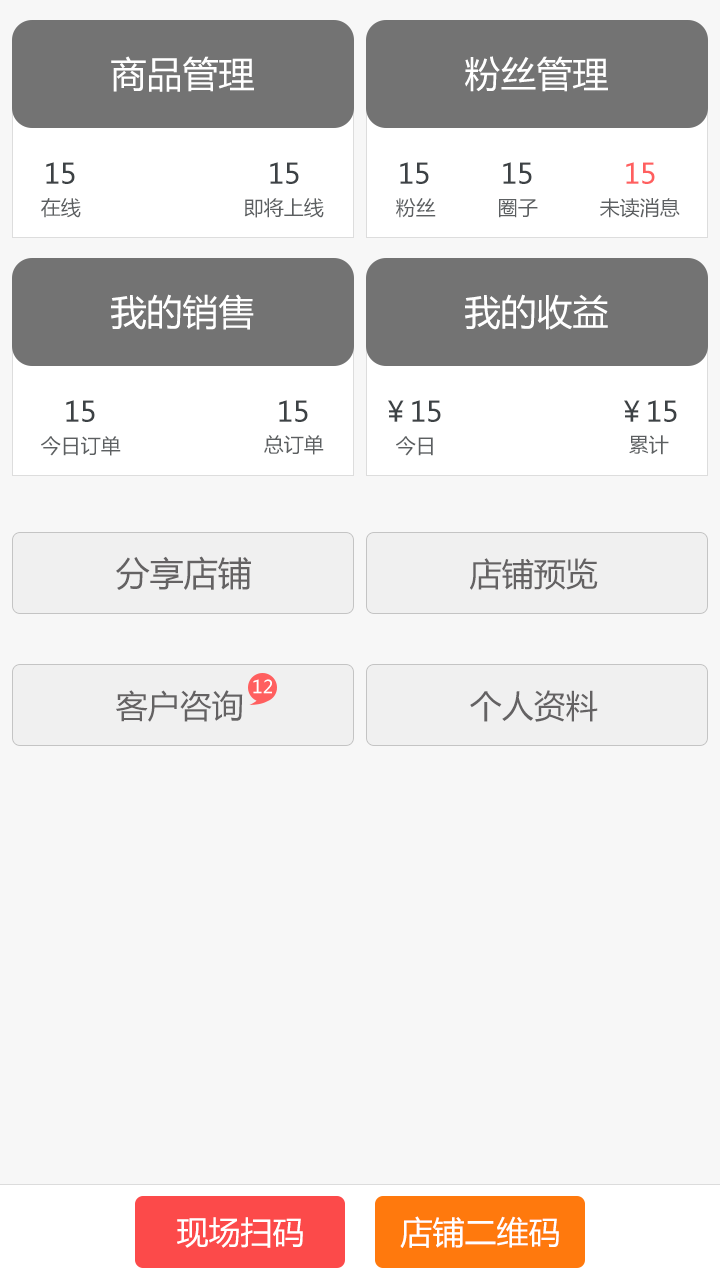
<style>
.page{position:relative;width:720px;height:1280px;background:#f7f7f7}
.page>*{position:absolute;margin:0}
.t1{font:36px "MicrosoftYaHei";color:#ffffff}
.t2{font:28px "MicrosoftYaHei";color:#3d4245}
.t3{font:28px "MicrosoftYaHei";color:#ff5f5f}
.t4{font:20px "MicrosoftYaHei";color:#5c5f61}
.t5{font:34px "MicrosoftYaHei";color:#646263}
.t6{font:32px "MicrosoftYaHei";color:#646263}
.t7{font:18px "MicrosoftYaHei";color:#ffffff}
.t8{font:32px "MicrosoftYaHei";color:#ffffff}
</style>
<div class="page">
<p class="t1" style="left:111px;top:56px;width:143px;height:36px">商品管理</p>
<p class="t1" style="left:465px;top:56px;width:143px;height:36px">粉丝管理</p>
<p class="t2" style="left:46px;top:162px;width:29px;height:22px">15</p>
<p class="t2" style="left:270px;top:162px;width:29px;height:22px">15</p>
<p class="t2" style="left:400px;top:162px;width:29px;height:22px">15</p>
<p class="t2" style="left:503px;top:162px;width:29px;height:22px">15</p>
<p class="t3" style="left:626px;top:162px;width:29px;height:22px">15</p>
<p class="t4" style="left:41px;top:198px;width:40px;height:20px">在线</p>
<p class="t4" style="left:244px;top:198px;width:80px;height:20px">即将上线</p>
<p class="t4" style="left:396px;top:198px;width:40px;height:20px">粉丝</p>
<p class="t4" style="left:600px;top:198px;width:80px;height:20px">未读消息</p>
<p class="t4" style="left:499px;top:199px;width:39px;height:19px">圈子</p>
<p class="t1" style="left:111px;top:294px;width:143px;height:36px">我的销售</p>
<p class="t1" style="left:465px;top:294px;width:143px;height:36px">我的收益</p>
<p class="t2" style="left:66px;top:400px;width:29px;height:22px">15</p>
<p class="t2" style="left:66px;top:400px;width:29px;height:22px">15</p>
<p class="t2" style="left:279px;top:400px;width:29px;height:22px">15</p>
<p class="t2" style="left:388px;top:400px;width:53px;height:22px">￥15</p>
<p class="t2" style="left:624px;top:400px;width:53px;height:22px">￥15</p>
<p class="t4" style="left:41px;top:436px;width:80px;height:20px">今日订单</p>
<p class="t4" style="left:264px;top:435px;width:60px;height:20px">总订单</p>
<p class="t4" style="left:396px;top:436px;width:37px;height:20px">今日</p>
<p class="t4" style="left:629px;top:435px;width:40px;height:20px">累计</p>
<p class="t5" style="left:116px;top:556px;width:135px;height:34px">分享店铺</p>
<p class="t6" style="left:470px;top:558px;width:128px;height:32px">店铺预览</p>
<p class="t7" style="left:253px;top:679px;width:19px;height:15px">12</p>
<p class="t6" style="left:116px;top:690px;width:127px;height:32px">客户咨询</p>
<p class="t6" style="left:470px;top:690px;width:128px;height:32px">个人资料</p>
<p class="t8" style="left:177px;top:1217px;width:126px;height:31px">现场扫码</p>
<p class="t8" style="left:400px;top:1216px;width:159px;height:32px">店铺二维码</p>
</div>
